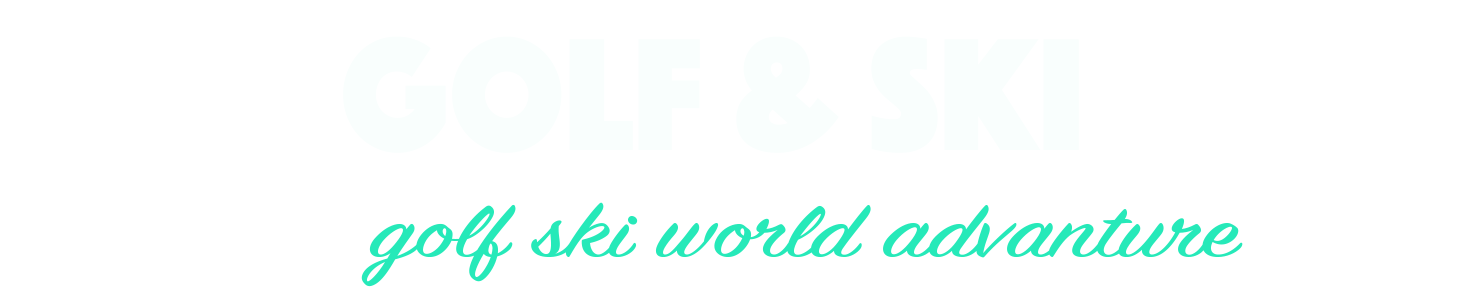
<style>
.page{position:relative;width:1475px;height:299px;background:#ffffff}
.page>*{position:absolute;margin:0}
.t1{font:165.6px "Phosphate-Solid";color:#f9fefd;scale:0.94 1}
.t2{font:81.5px "SignPainter-HouseScript";color:#26e9b9;scale:1.41 1}
</style>
<div class="page">
<p class="t1" style="left:343px;top:36px;width:736px;height:117px">GOLF &amp; SKI</p>
<p class="t2" style="left:361px;top:202px;width:882px;height:85px">golf ski world advanture</p>
</div>
